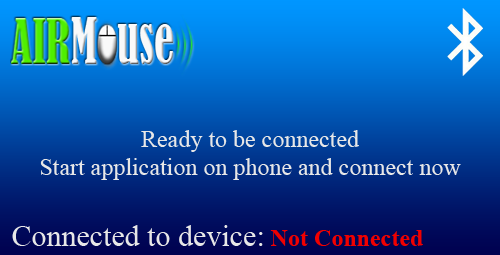
<style>
.page{position:relative;width:500px;height:255px}
.page>*{position:absolute;margin:0}
.t1{font:24px "TimesNewRomanPSMT";color:#e7e7e7}
.t2{font:30px "TimesNewRomanPSMT";color:#e7e7e7}
.t3{font:24px "TimesNewRomanPS-BoldMT";color:#f00000}
</style>
<div class="page">
<p class="t1" style="left:40px;top:130px;width:421px;height:50px;text-align:center">Ready to be connected<br>Start application on phone and connect now</p>
<p class="t2" style="left:12px;top:225px;width:251px;height:21px">Connected to device:</p>
<p class="t3" style="left:270px;top:230px;width:153px;height:16px">Not Connected</p>
</div>
